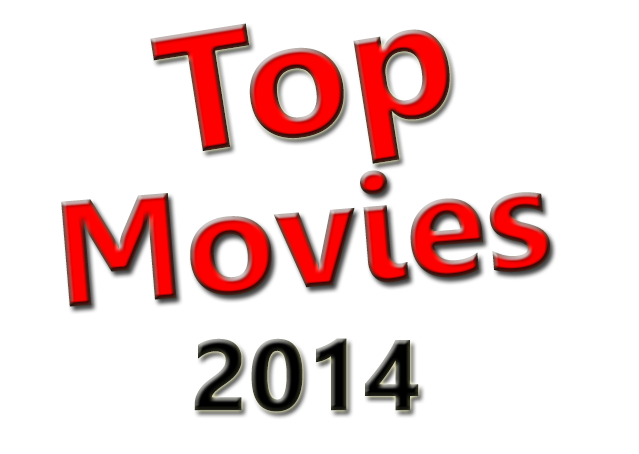
<style>
.page{position:relative;width:639px;height:454px;background:#ffffff}
.page>*{position:absolute;margin:0}
.t1{font:170.1px "Leelawadee-Bold"}
.t2{font:150px "Leelawadee-Bold"}
.t3{font:100px "Leelawadee-Bold"}
</style>
<div class="page">
<p class="t1" style="left:150px;top:23px;width:300px;height:141px;rotate:-9deg">Top</p>
<p class="t2" style="left:61px;top:170px;width:489px;height:137px;rotate:-5deg">Movies</p>
<p class="t3" style="left:194px;top:338px;width:225px;height:74px">2014</p>
</div>
